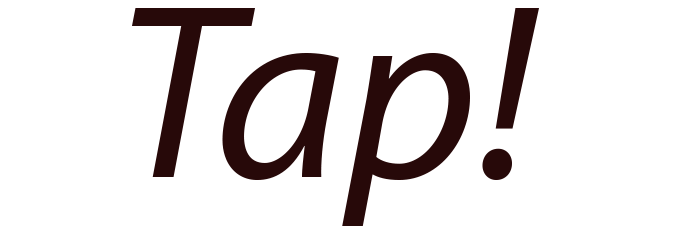
<style>
.page{position:relative;width:677px;height:233px;background:#ffffff}
.page>*{position:absolute;margin:0}
.t1{font:250px "MyriadPro-It";color:#270909}
</style>
<div class="page">
<p class="t1" style="left:132px;top:8px;width:407px;height:218px">Tap!</p>
</div>
